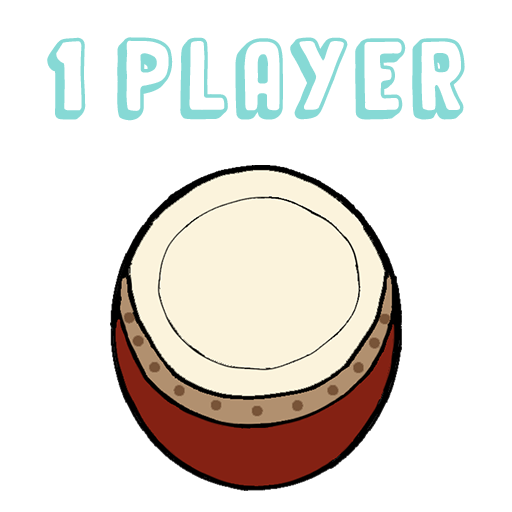
<style>
.page{position:relative;width:512px;height:512px;background:#ffffff}
.page>*{position:absolute;margin:0}
.t1{font:50px "OrganicRelief";letter-spacing:0.1em;color:#86d9d5}
</style>
<div class="page">
<p class="t1" style="left:47px;top:37px;width:418px;height:84px">1 PLAYER</p>
</div>
